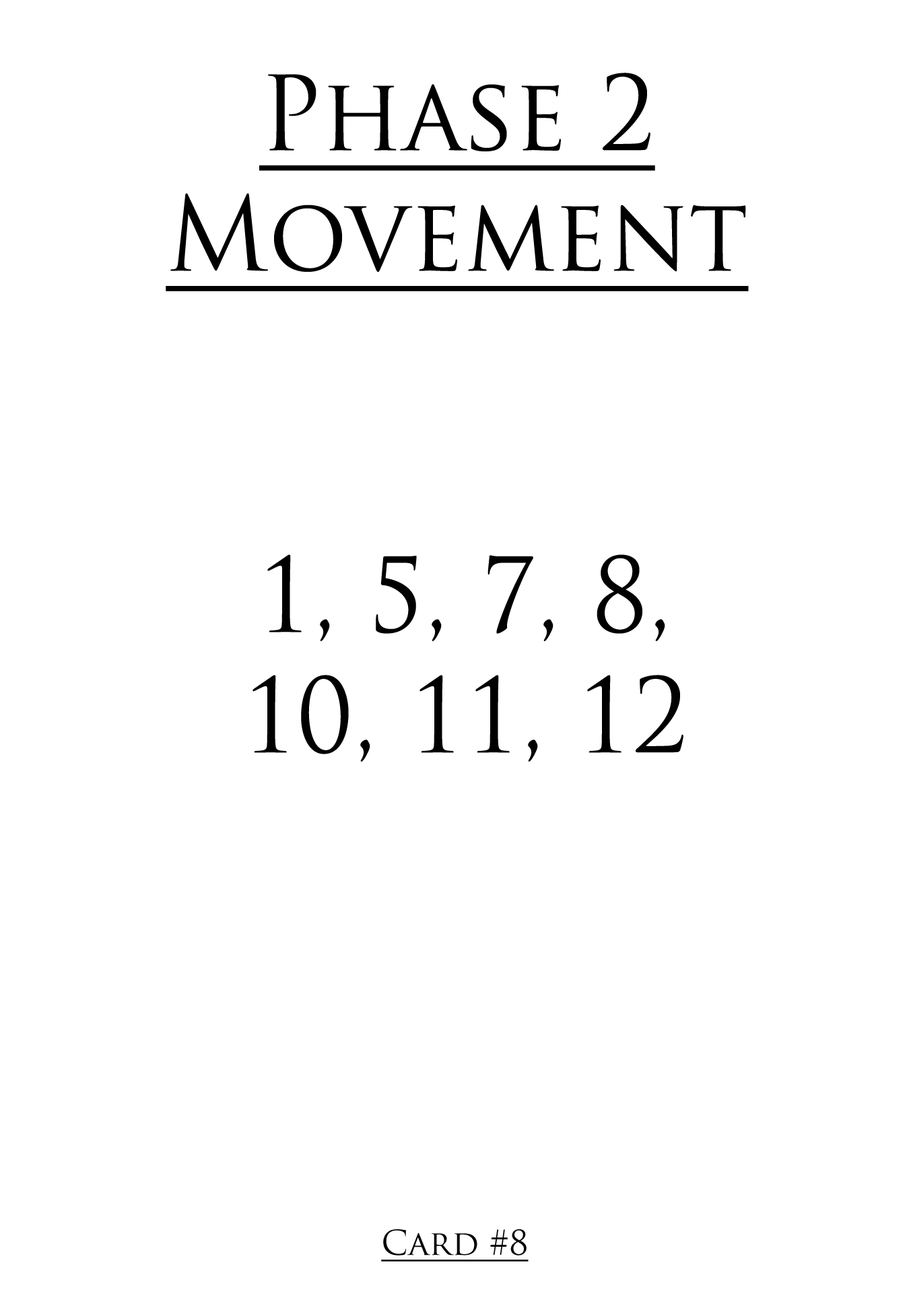
<style>
.page{position:relative;width:909px;height:1312px;background:#ffffff}
.page>*{position:absolute;margin:0}
.t1{font:100.6px "TrajanPro-Regular";color:#000000;text-decoration:underline;scale:0.97 1}
.t2{font:100.6px "TrajanPro-Regular";color:#000000;scale:0.97 1}
.t3{font:33.5px "TrajanPro-Regular";color:#000000;text-decoration:underline}
</style>
<div class="page">
<p class="t1" style="left:166px;top:73px;width:582px;height:218px;text-align:center">Phase 2<br>Movement</p>
<p class="t2" style="left:252px;top:555px;width:431px;height:207px;text-align:center">1, 5, 7, 8,<br>10, 11, 12</p>
<p class="t3" style="left:381px;top:1230px;width:147px;height:32px">Card #8</p>
</div>
